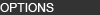
<style>
.page{position:relative;width:100px;height:15px;background:#333333}
.page>*{position:absolute;margin:0}
.t1{font:12px "HalfLife";color:#ffffff}
</style>
<div class="page">
<p class="t1" style="left:0px;top:3px;width:54px;height:9px">OPTIONS</p>
</div>
